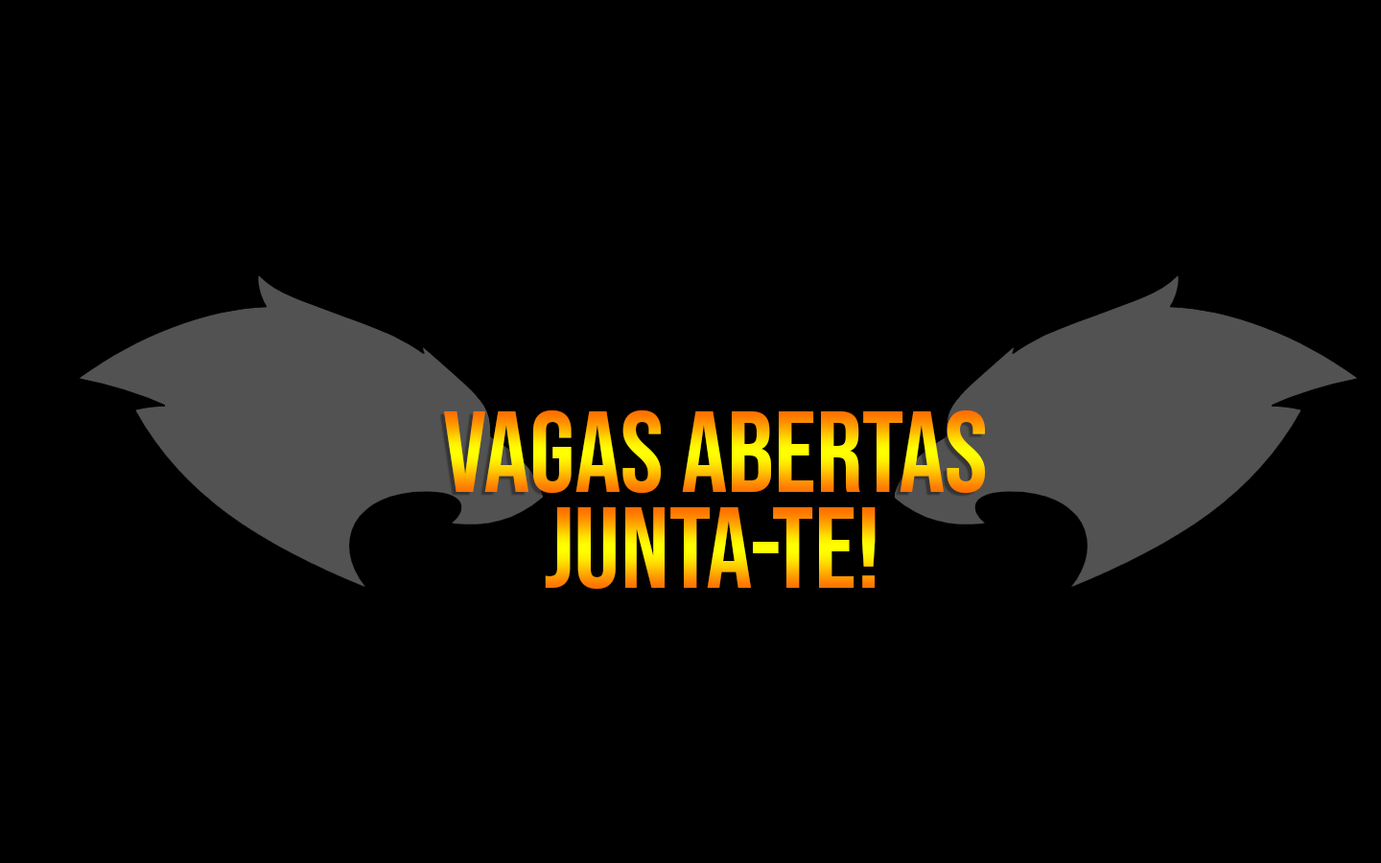
<style>
.page{position:relative;width:1381px;height:863px;background:#000000}
.page>*{position:absolute;margin:0}
.t1{font:115.1px "BebasNeue-Regular"}
</style>
<div class="page">
<p class="t1" style="left:444px;top:411px;width:541px;height:82px">vagas abertas</p>
<p class="t1" style="left:545px;top:507px;width:331px;height:82px">JUNTA-TE!</p>
</div>
